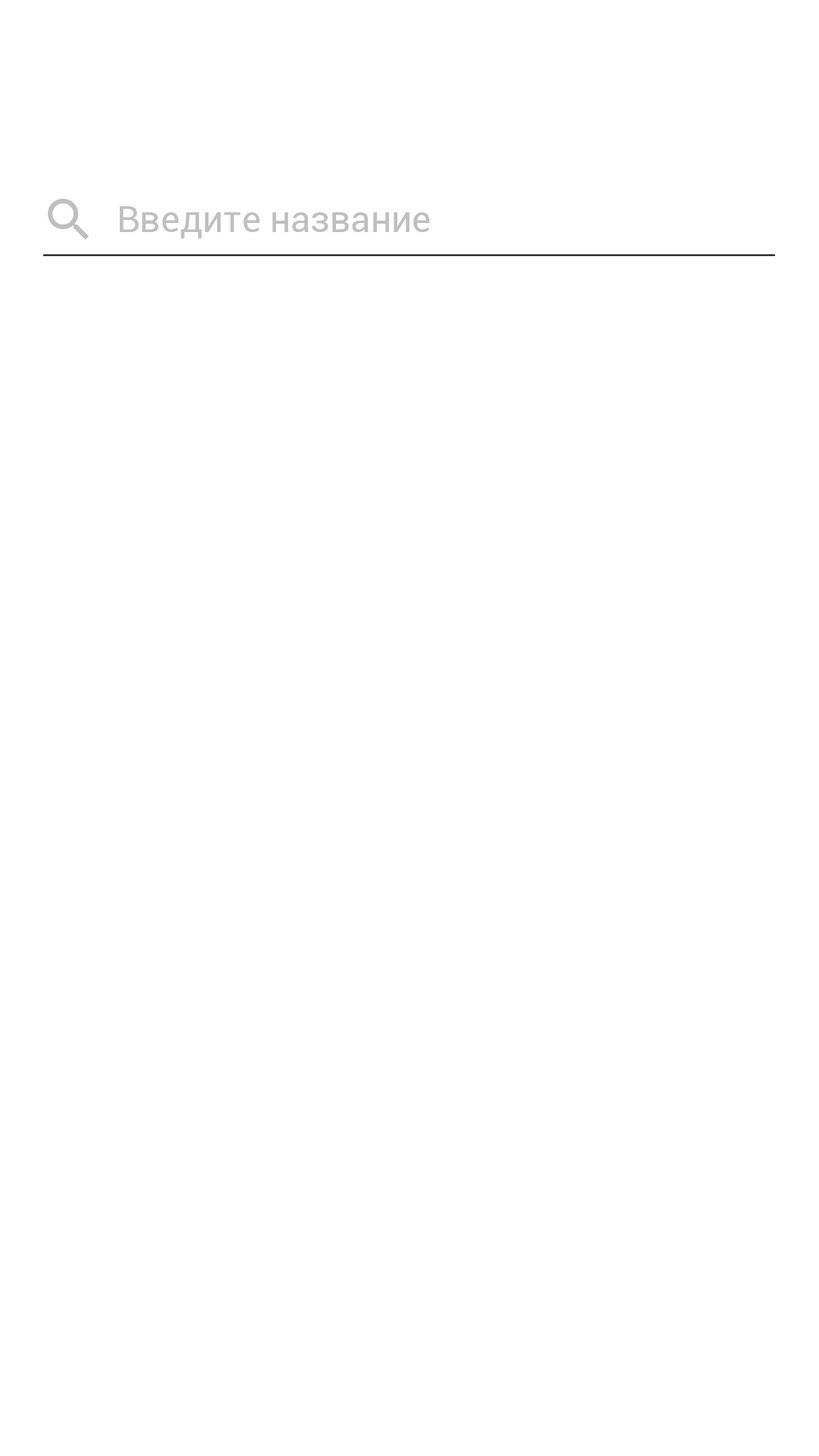
<style>
.page{position:relative;width:819px;height:1456px;background:#ffffff}
.page>*{position:absolute;margin:0}
.t1{font:36.4px "Roboto-Regular";color:#bfbfbf}
</style>
<div class="page">
<p class="t1" style="left:120px;top:206px;width:310px;height:33px">Введите название</p>
</div>
